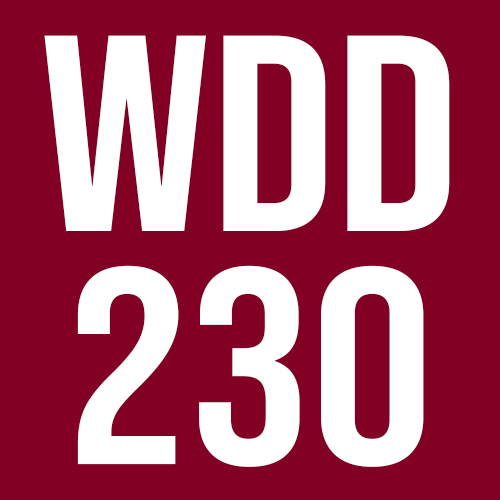
<style>
.page{position:relative;width:500px;height:500px;background:#810024}
.page>*{position:absolute;margin:0}
.t1{font:278.5px/232.1px "BebasNeue-Regular";color:#ffffff;scale:1.1 1}
</style>
<div class="page">
<p class="t1" style="left:44px;top:35px;width:406px;height:432px;text-align:center">WDD<br>230</p>
</div>
